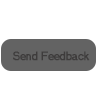
<style>
.page{position:relative;width:100px;height:100px;background:#ffffff}
.page>*{position:absolute;margin:0}
.t1{font:11.9px "MS Sans Serif";color:#3e3c3c;font-weight:bold;scale:0.91 1}
</style>
<div class="page">
<p class="t1" style="left:13px;top:51px;width:77px;height:10px">Send Feedback</p>
</div>
